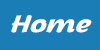
<style>
.page{position:relative;width:100px;height:50px;background:#1a7db6}
.page>*{position:absolute;margin:0}
.t1{font:24px "ArturoTrial-BoldItalic";color:#ffffff;font-style:italic}
</style>
<div class="page">
<p class="t1" style="left:11px;top:15px;width:81px;height:18px">Home</p>
</div>
